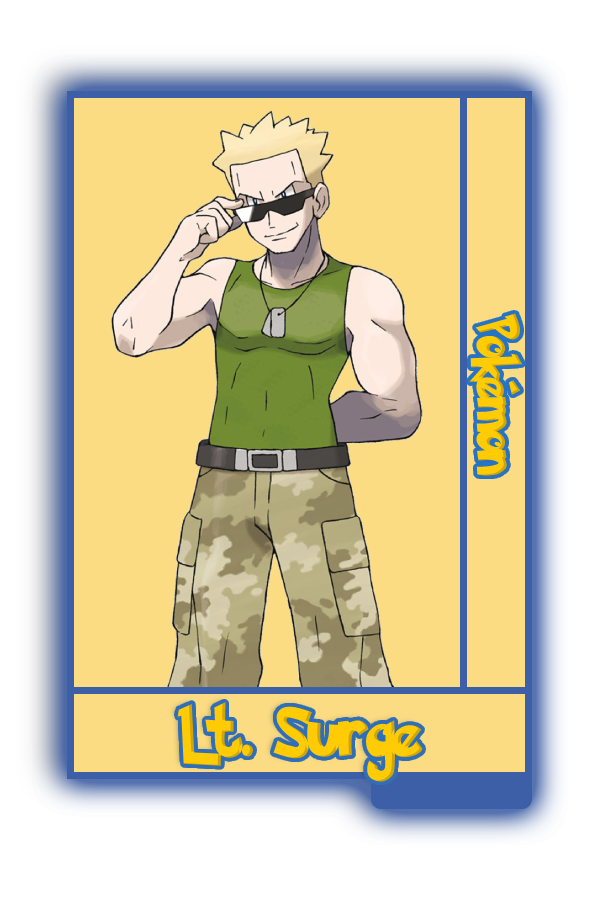
<style>
.page{position:relative;width:600px;height:900px;background:#fbdc83}
.page>*{position:absolute;margin:0}
.t1{font:48.8px "PokemonSolidNormal";color:#ffcb05;scale:0.8 1}
.t2{font:56.6px "PokemonSolidNormal";color:#ffcb05;scale:0.92 1}
</style>
<div class="page">
<p class="t1" style="left:469px;top:313px;width:54px;height:163px;rotate:90deg">Pokémon</p>
<p class="t2" style="left:177px;top:702px;width:246px;height:80px">Lt. Surge</p>
</div>
